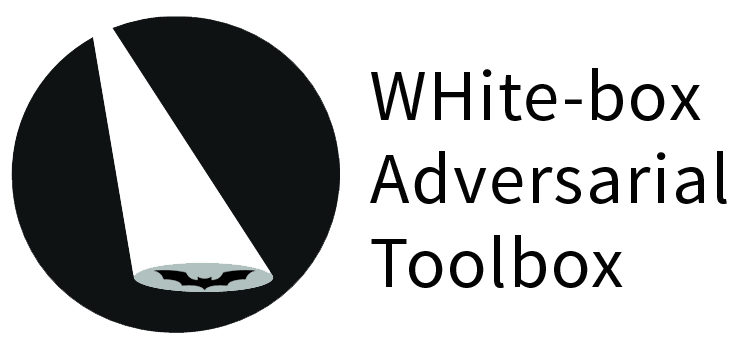
<style>
.page{position:relative;width:750px;height:350px;background:#ffffff}
.page>*{position:absolute;margin:0}
.t1{font:72.9px/83.3px "SourceSansPro-Regular";letter-spacing:0.025em;color:#030303}
</style>
<div class="page">
<p class="t1" style="left:370px;top:68px;width:357px;height:220px">WHite-box<br>Adversarial<br>Toolbox</p>
</div>
